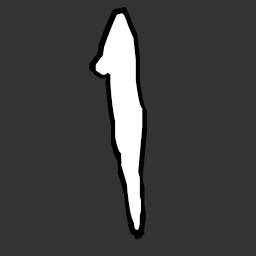
<style>
.page{position:relative;width:256px;height:256px;background:#333333}
.page>*{position:absolute;margin:0}
.t1{font:275.5px "VisionsoftheDead";letter-spacing:0.1em;color:#ffffff}
</style>
<div class="page">
<p class="t1" style="left:95px;top:13px;width:48px;height:217px">1</p>
</div>
